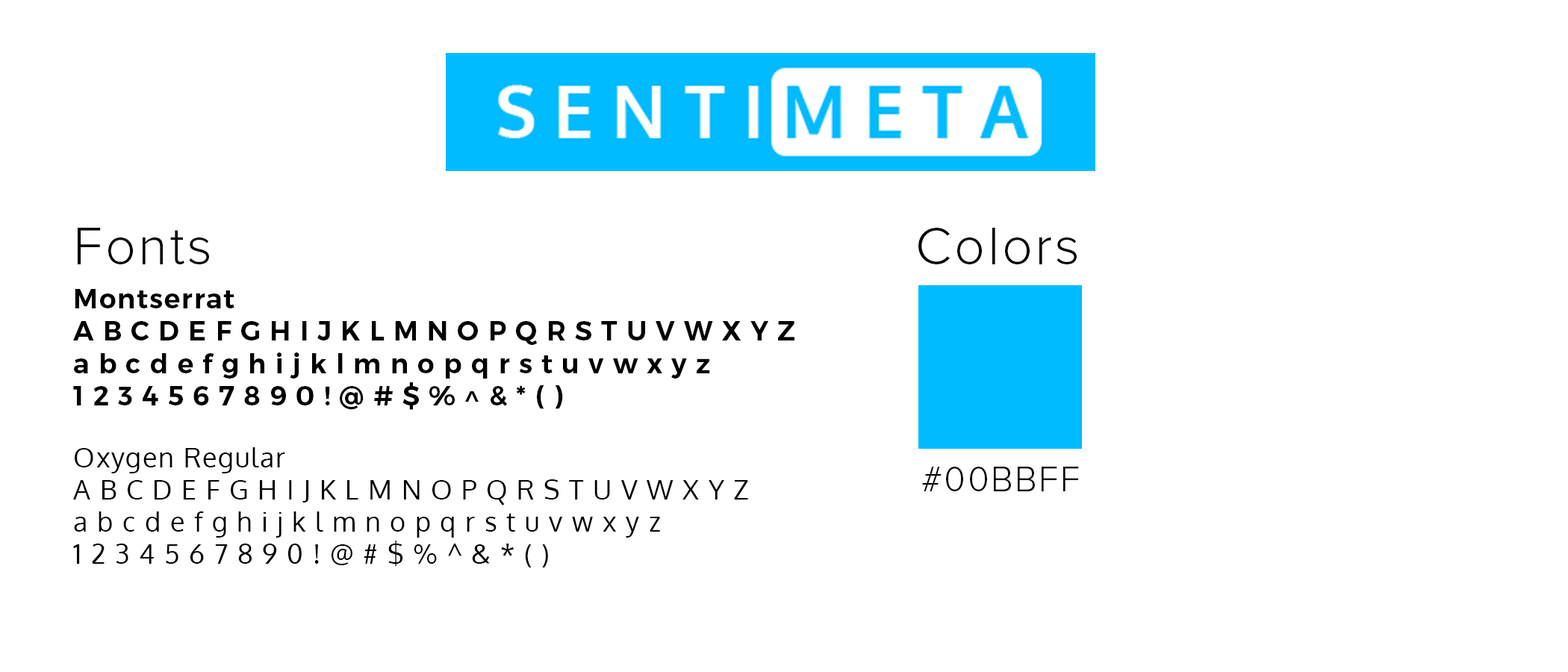
<style>
.page{position:relative;width:1568px;height:672px;background:#ffffff}
.page>*{position:absolute;margin:0}
.t1{font:53.8px "ProximaNova-Light";letter-spacing:0.05em;color:#000000}
.t2{font:26.9px "Montserrat-SemiBold";letter-spacing:0.05em;color:#000000}
.t3{font:26.9px "Oxygen-Regular";letter-spacing:0.05em;color:#000000}
.t4{font:35.8px "ProximaNova-Light";letter-spacing:0.05em;color:#000000}
</style>
<div class="page">
<p class="t1" style="left:78px;top:228px;width:131px;height:36px">Fonts</p>
<p class="t1" style="left:918px;top:228px;width:159px;height:36px">Colors</p>
<p class="t2" style="left:73px;top:289px;width:721px;height:121px">Montserrat <br>A B C D E F G H I J K L M N O P Q R S T U V W X Y Z<br>a b c d e f g h i j k l m n o p q r s t u v w x y z<br>1 2 3 4 5 6 7 8 9 0 ! @ # $ % ^ &amp; * ( )</p>
<p class="t3" style="left:73px;top:447px;width:675px;height:120px">Oxygen Regular<br>A B C D E F G H I J K L M N O P Q R S T U V W X Y Z<br>a b c d e f g h i j k l m n o p q r s t u v w x y z<br>1 2 3 4 5 6 7 8 9 0 ! @ # $ % ^ &amp; * ( )</p>
<p class="t4" style="left:922px;top:467px;width:157px;height:24px">#00BBFF</p>
</div>
